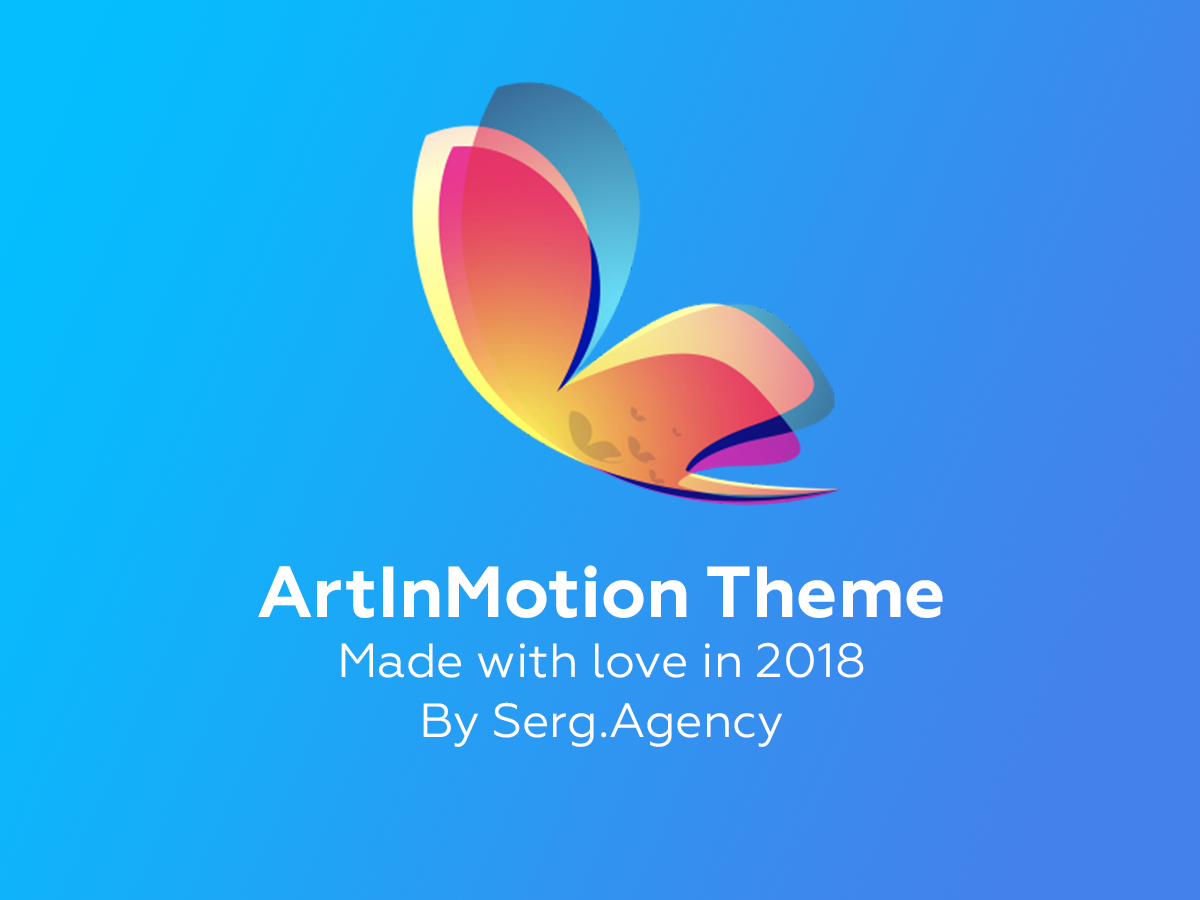
<style>
.page{position:relative;width:1200px;height:900px}
.page>*{position:absolute;margin:0}
.t1{font:48px/60px "Geometria";color:#ffffff}
.t2{font:72px/80px "Geometria-Bold";color:#ffffff}
</style>
<div class="page">
<p class="t1" style="left:258px;top:565px;width:685px;height:182px;text-align:center"><span class="t2">ArtInMotion Theme<br></span>Made with love in 2018<br>By Serg.Agency</p>
</div>
